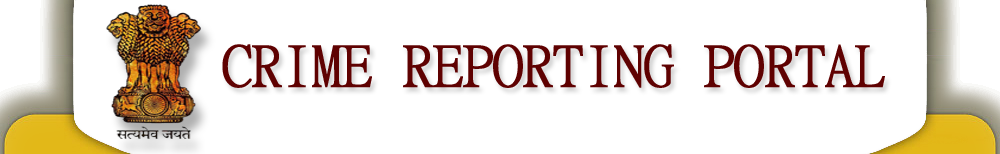
<style>
.page{position:relative;width:1000px;height:154px;background:#ffffff}
.page>*{position:absolute;margin:0}
.t1{font:57.2px "MingLiU-ExtB";color:#5f0101;text-transform:uppercase;font-weight:bold}
</style>
<div class="page">
<p class="t1" style="left:222px;top:44px;width:663px;height:44px">CRIME REPORTING PORTAL</p>
</div>
